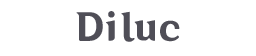
<style>
.page{position:relative;width:256px;height:56px;background:#ffffff}
.page>*{position:absolute;margin:0}
.t1{font:36px "HYWenHei-HEW";color:#4f4e57}
</style>
<div class="page">
<p class="t1" style="left:76px;top:11px;width:104px;height:31px">Diluc</p>
</div>
